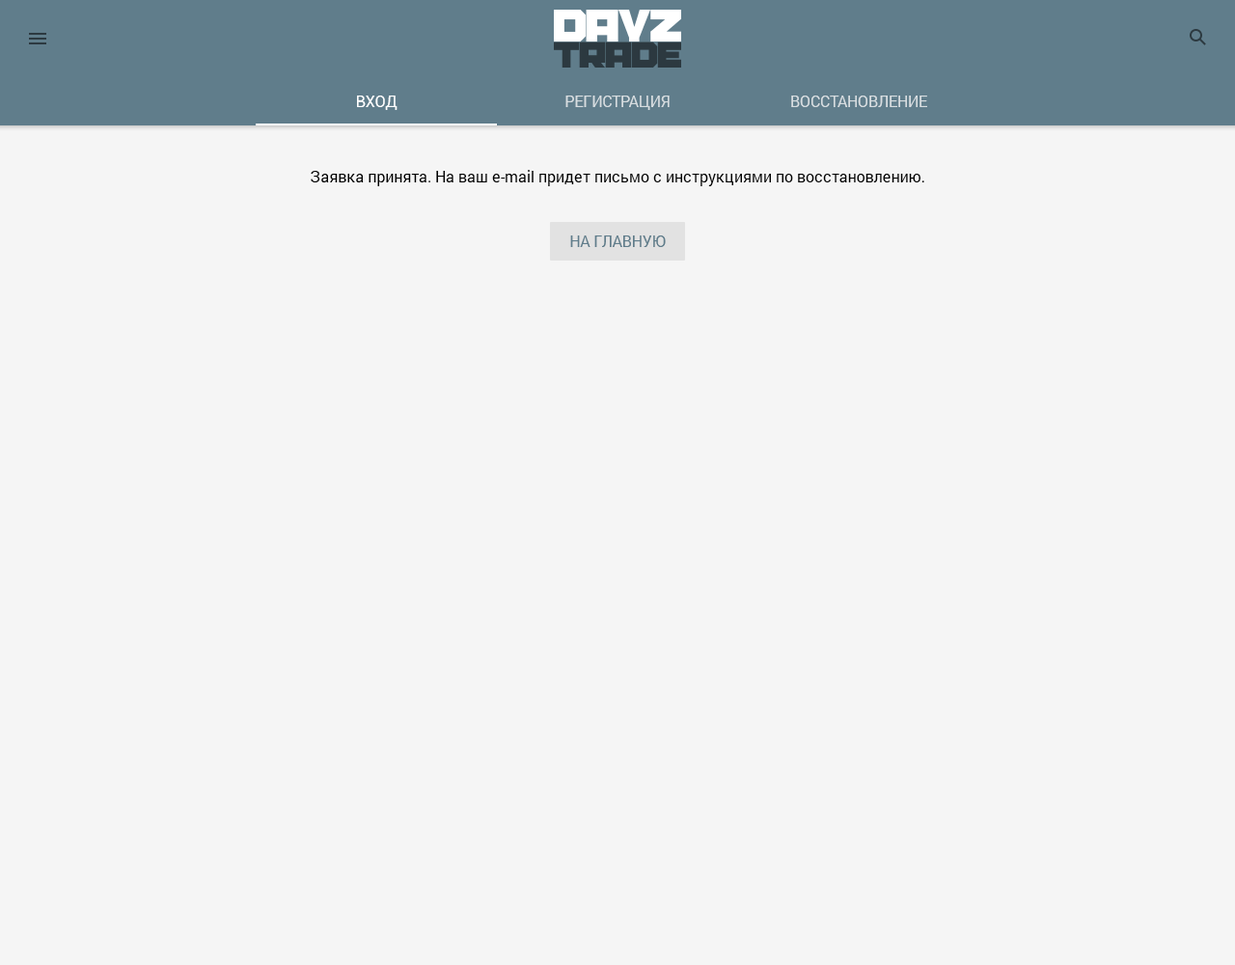
<style>
.page{position:relative;width:1235px;height:965px;background:#f5f5f5}
.page>*{position:absolute;margin:0}
.t1{font:15.4px "Roboto-Regular";color:#ffffff}
.t2{font:15.4px "Roboto-Regular";color:#d7dde0}
.t3{font:15.4px "Roboto-Regular";color:#000000}
.t4{font:15.4px "Roboto-Regular";color:#607d8b}
</style>
<div class="page">
<p class="t1" style="left:357px;top:96px;width:41px;height:14px">ВХОД</p>
<p class="t2" style="left:566px;top:96px;width:104px;height:14px">РЕГИСТРАЦИЯ</p>
<p class="t2" style="left:791px;top:96px;width:137px;height:11px">ВОССТАНОВЛЕНИЕ</p>
<p class="t3" style="left:311px;top:170px;width:614px;height:16px">Заявка принята. На ваш e-mail придет письмо с инструкциями по восстановлению.</p>
<p class="t4" style="left:570px;top:236px;width:96px;height:11px">НА ГЛАВНУЮ</p>
</div>
